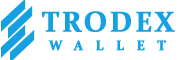
<style>
.page{position:relative;width:178px;height:60px;background:#ffffff}
.page>*{position:absolute;margin:0}
.t1{font:28px "Constantia-Bold";letter-spacing:0.02em;color:#15a0e1;text-transform:uppercase;font-weight:bold}
.t2{font:14px "Constantia-Bold";letter-spacing:0.8em;color:#15a0e1;text-transform:uppercase;font-weight:bold}
</style>
<div class="page">
<p class="t1" style="left:42px;top:11px;width:133px;height:21px">trodex</p>
<p class="t2" style="left:48px;top:40px;width:118px;height:11px">wallet</p>
</div>
